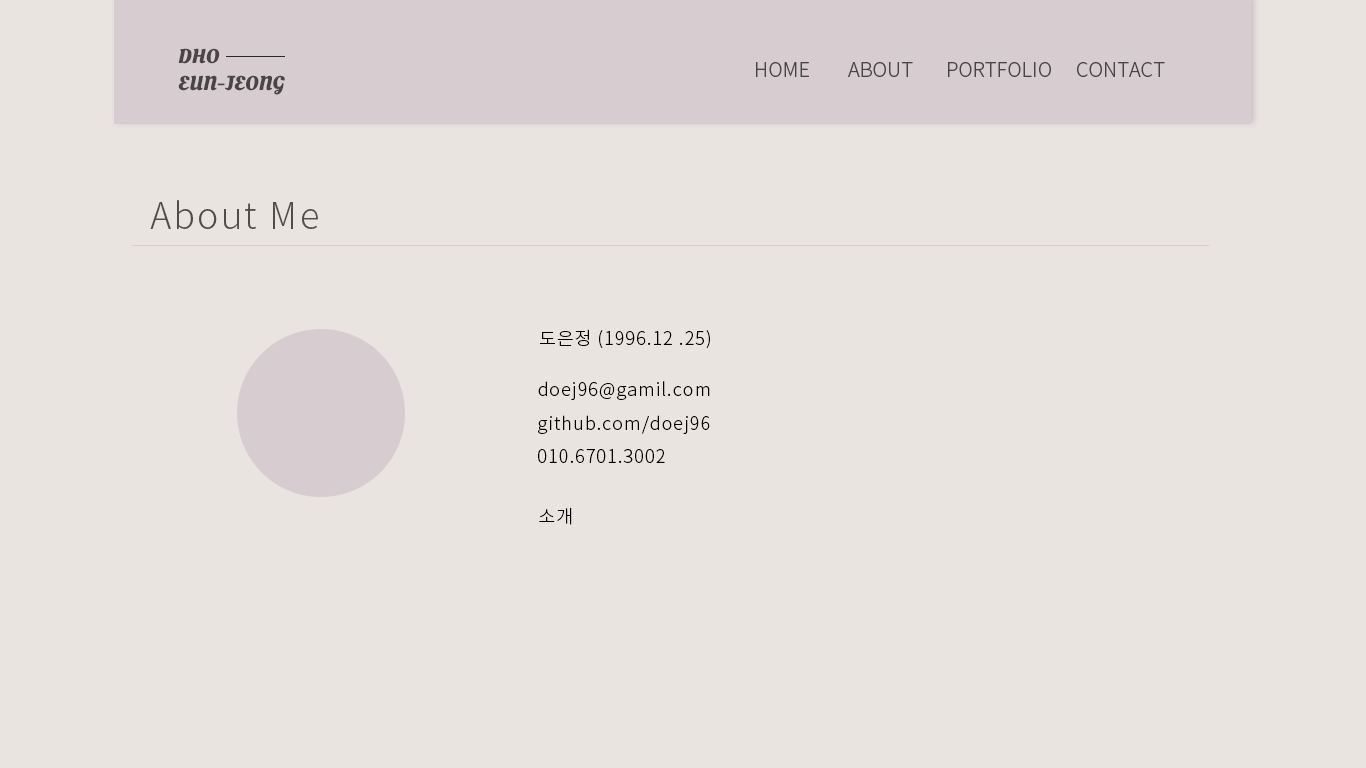
<style>
.page{position:relative;width:1366px;height:768px;background:#e9e4e0}
.page>*{position:absolute;margin:0}
.t1{font:20px/27px "OleoScript-Bold";color:#494446}
.t2{font:20px "NotoSansCJKkr-Light";color:#494446}
.t3{font:36px "NotoSansCJKkr-Light";letter-spacing:0.06em;color:#4f4d4c}
.t4{font:18px "NotoSansCJKkr-Light";letter-spacing:0.06em;color:#000000}
</style>
<div class="page">
<p class="t1" style="left:178px;top:48px;width:107px;height:47px">DHO<br>EUN-JEONG</p>
<p class="t2" style="left:756px;top:62px;width:53px;height:15px">HOME</p>
<p class="t2" style="left:848px;top:62px;width:65px;height:15px">ABOUT</p>
<p class="t2" style="left:948px;top:62px;width:103px;height:15px">PORTFOLIO</p>
<p class="t2" style="left:1077px;top:62px;width:88px;height:15px">CONTACT</p>
<p class="t3" style="left:150px;top:200px;width:168px;height:29px">About Me</p>
<p class="t4" style="left:540px;top:329px;width:170px;height:20px">도은정 (1996.12 .25)</p>
<p class="t4" style="left:538px;top:381px;width:172px;height:19px">doej96@gamil.com</p>
<p class="t4" style="left:538px;top:415px;width:172px;height:19px">github.com/doej96</p>
<p class="t4" style="left:538px;top:449px;width:127px;height:14px">010.6701.3002</p>
<p class="t4" style="left:539px;top:507px;width:33px;height:18px">소개</p>
</div>
